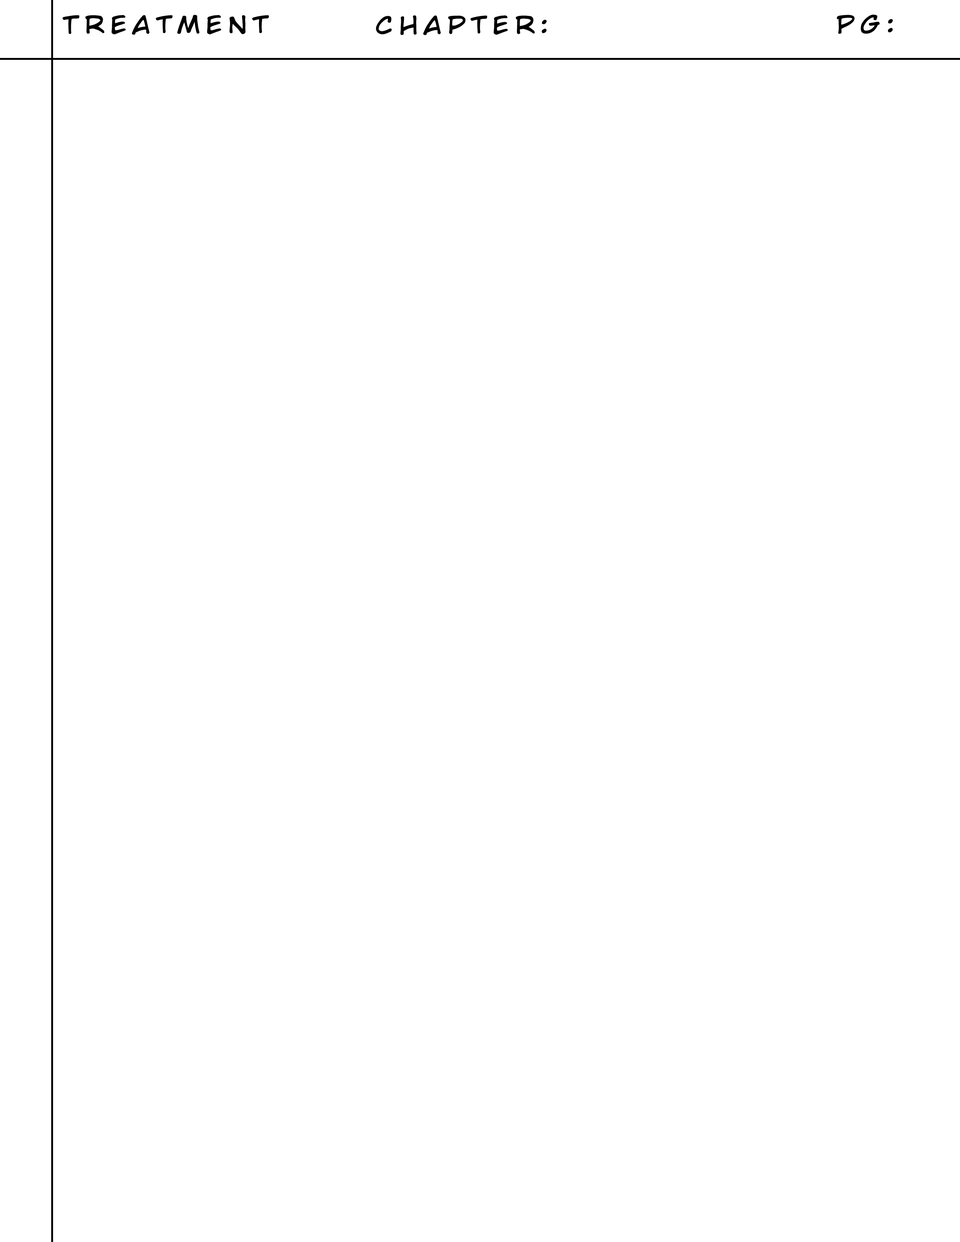
<style>
.page{position:relative;width:960px;height:1242px;background:#ffffff}
.page>*{position:absolute;margin:0}
.t1{font:23.4px "WildWordsRoman";letter-spacing:0.22em;color:#000000;scale:1.17 1}
</style>
<div class="page">
<p class="t1" style="left:62px;top:15px;width:207px;height:20px">Treatment</p>
<p class="t1" style="left:376px;top:15px;width:171px;height:20px">Chapter:</p>
<p class="t1" style="left:837px;top:15px;width:56px;height:19px">PG:</p>
</div>
